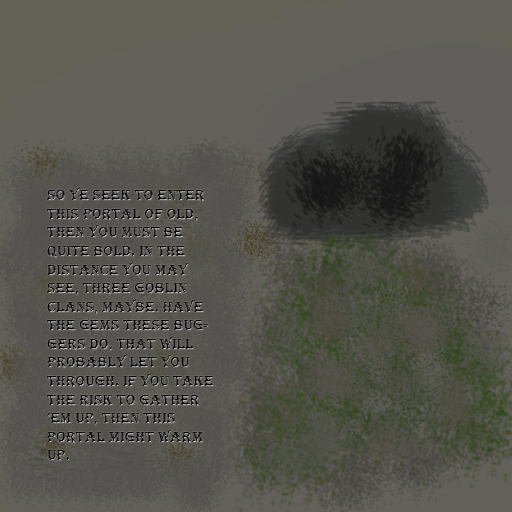
<style>
.page{position:relative;width:512px;height:512px}
.page>*{position:absolute;margin:0}
.t1{font:15.5px "Algerian";color:#0e0e0f}
</style>
<div class="page">
<p class="t1" style="left:46px;top:187px;width:168px;height:273px">So ye seek to enter this portal of old, then you must be quite bold. in the distance you may see, three goblin clans, maybe. have the gems these buggers do, that will probably let you through. if you take the risk to gather ‘em up, then this portal might warm up.</p>
</div>
